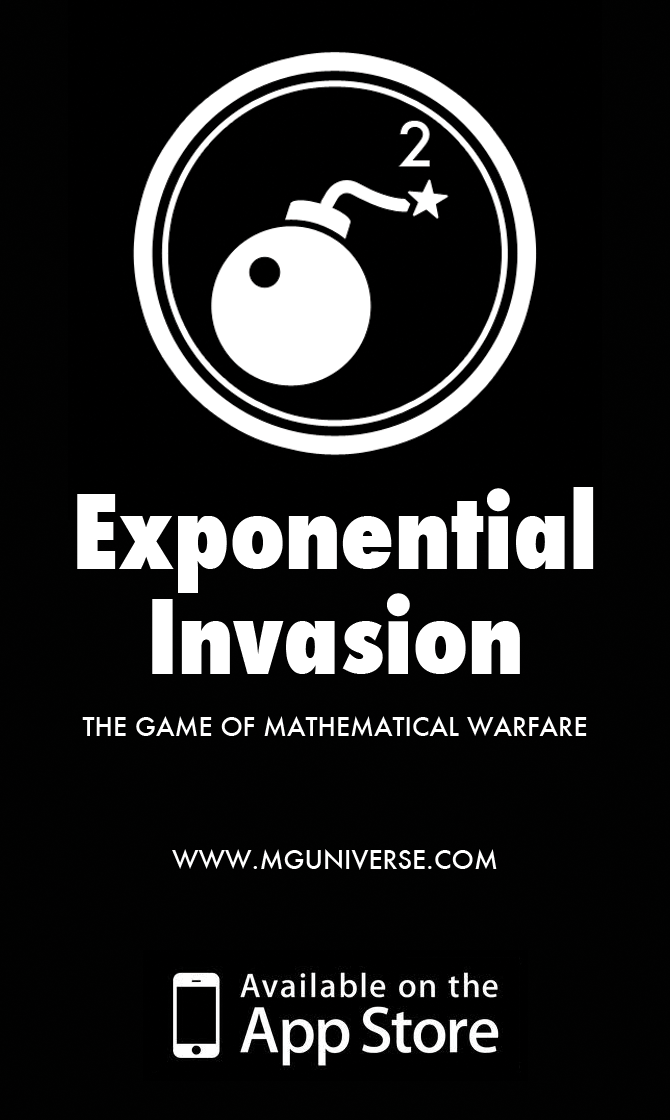
<style>
.page{position:relative;width:670px;height:1120px;background:#000000}
.page>*{position:absolute;margin:0}
.t1{font:100px "Futura-CondensedExtraBold";color:#ffffff}
.t2{font:25px "Futura-Medium";color:#ffffff}
</style>
<div class="page">
<p class="t1" style="left:77px;top:487px;width:517px;height:106px">Exponential</p>
<p class="t1" style="left:152px;top:593px;width:368px;height:81px">Invasion</p>
<p class="t2" style="left:82px;top:716px;width:505px;height:20px">THE GAME OF MATHEMATICAL WARFARE</p>
<p class="t2" style="left:172px;top:849px;width:325px;height:21px">WWW.MGUNIVERSE.COM</p>
</div>
